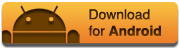
<style>
.page{position:relative;width:180px;height:48px}
.page>*{position:absolute;margin:0}
.t1{font:13.7px "Helvetica";color:#3e2300}
.t2{font:13.7px "Helvetica-Bold";color:#3e2300}
</style>
<div class="page">
<p class="t1" style="left:88px;top:9px;width:73px;height:27px">Download<br>for<span class="t2"> Android</span></p>
</div>
